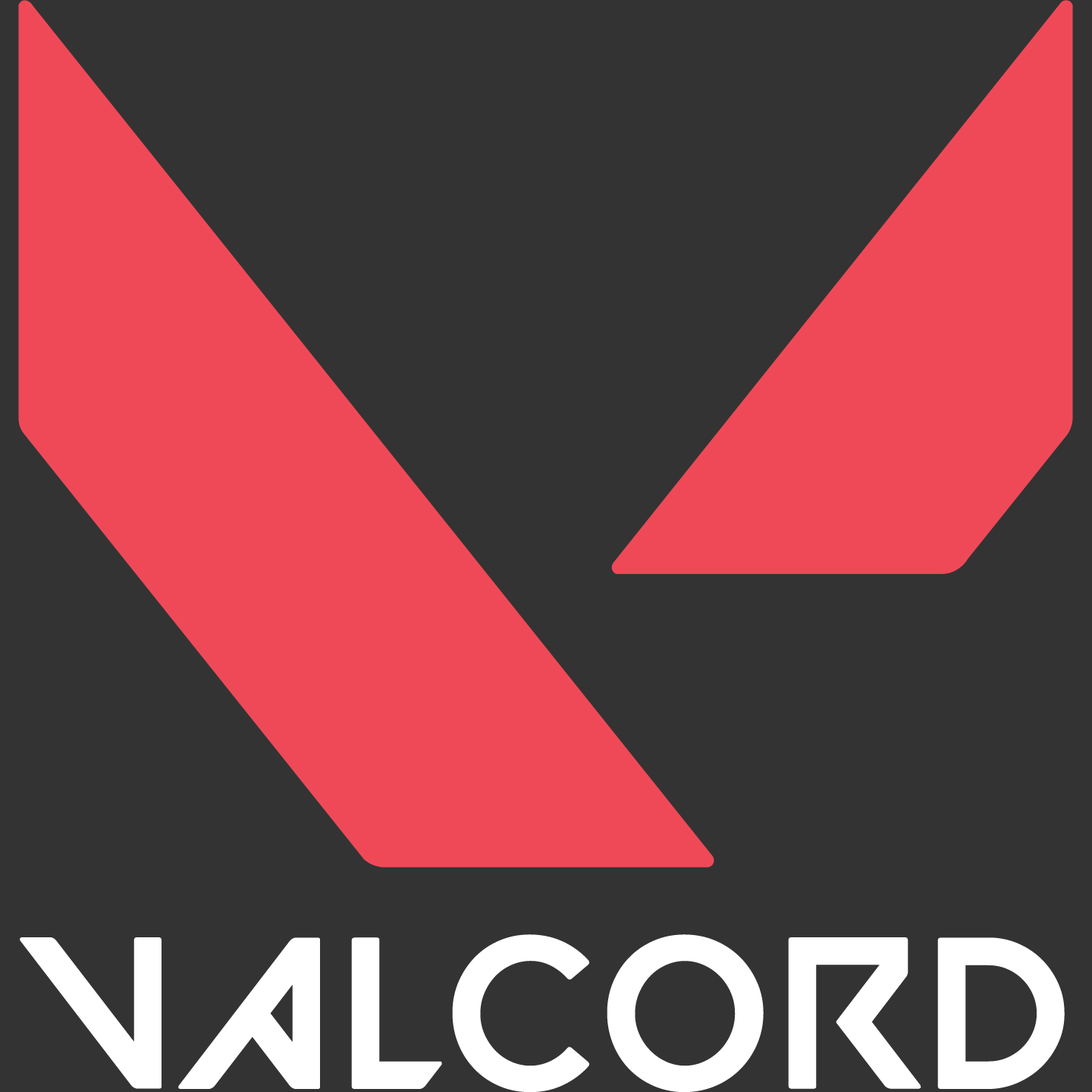
<style>
.page{position:relative;width:1092px;height:1092px;background:#333333}
.page>*{position:absolute;margin:0}
.t1{font:216.1px "VALORANT-Regular";color:#ffffff}
</style>
<div class="page">
<p class="t1" style="left:20px;top:934px;width:1045px;height:159px">VALCORD</p>
</div>
